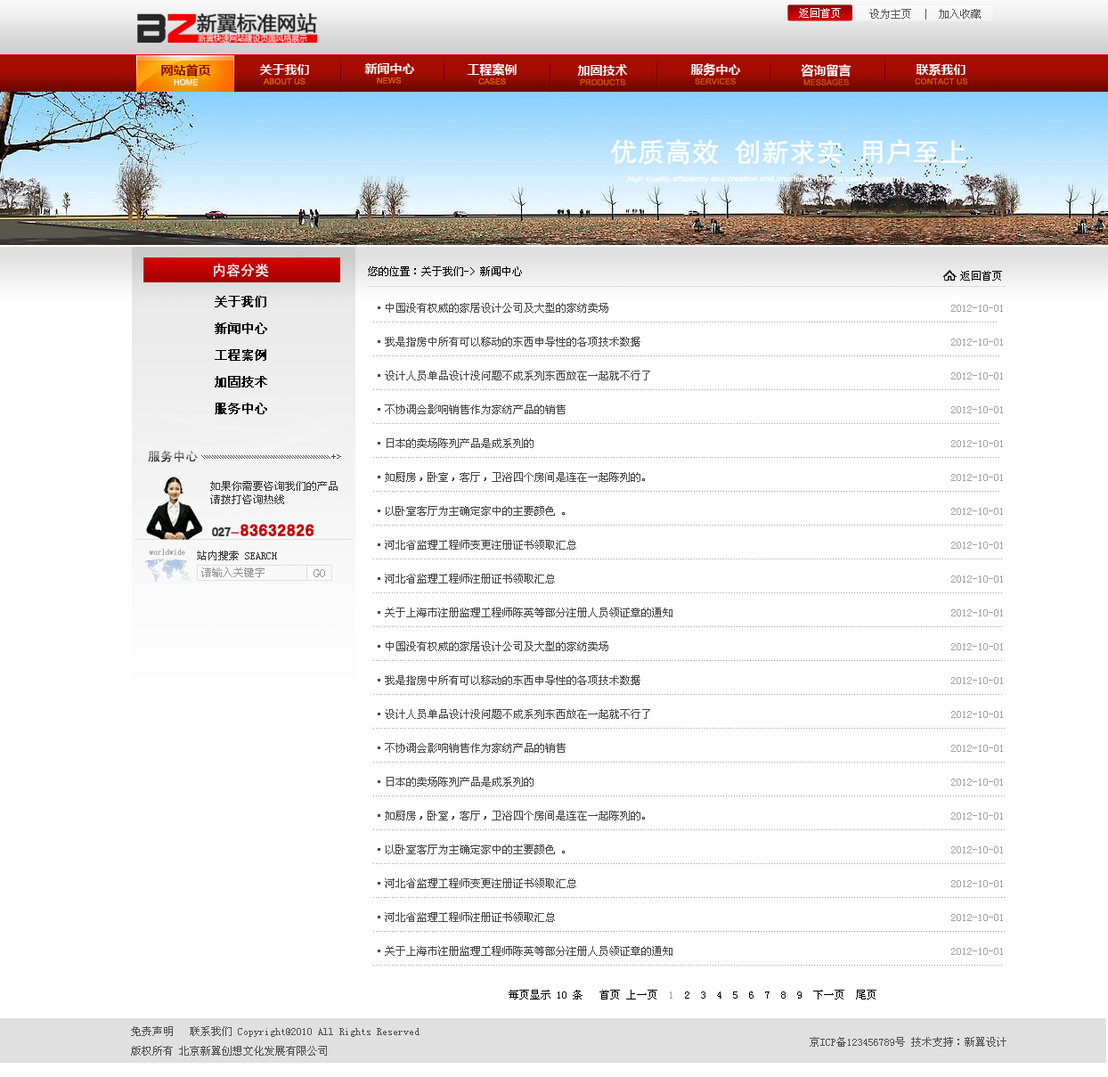
<style>
.page{position:relative;width:1108px;height:1077px;background:#ffffff}
.page>*{position:absolute;margin:0}
.t1{font:10.7px "SimSun";color:#ffffff}
.t2{font:10.7px "SimSun";color:#595757}
.t3{font:12.5px "MicrosoftYaHei";color:#950602}
.t4{font:12.5px "MicrosoftYaHei";color:#fffefe}
.t5{font:12.5px "MicrosoftYaHei";color:#ffffff}
.t6{font:8.1px "ArialMT";color:#dd6900}
.t7{font:8.1px "ArialMT";color:#cf5e07}
.t8{font:8.1px "ArialMT";color:#ffffff}
.t9{font:8.1px "ArialMT";color:#c5550d}
.t10{font:26.7px "FZHTJW--GB1-0";color:#ffffff}
.t11{font:7.8px "FZHTJW--GB1-0";color:#ffffff;scale:1.1 1}
.t12{font:14.2px "SimHei";color:#ffffff}
.t13{font:10.7px "SimSun";color:#000000}
.t14{font:12.5px/26.7px "SimSun";color:#000000;font-weight:bold}
.t15{font:10.7px/33.8px "SimSun";color:#464646}
.t16{font:10.7px/33.8px "SimSun";color:#a0a0a0}
.t17{font:5.5px "SimSun";letter-spacing:-0.25em;color:#464646;scale:1.94 1}
.t18{font:7.2px "SimHei";letter-spacing:-0.25em;color:#464646;scale:1.49 1}
.t19{font:5.5px "SimHei";letter-spacing:-0.25em;color:#464646;scale:1.94 1}
.t20{font:10.7px/13.4px "SimSun";color:#383838}
.t21{font:16.9px "HYb2gj";letter-spacing:0.05em;color:#c60000}
.t22{font:12.5px "HYb2gj";color:#383838}
.t23{font:12.5px "HYb2gj";color:#c60000}
.t24{font:8px "SimSun";color:#898989}
.t25{font:10.7px "SimSun";color:#383838}
.t26{font:10.7px "SimSun";color:#949494}
.t27{font:12.5px "SimSun";color:#949494}
.t28{font:10.7px "SimSun";color:#9f9fa0}
.t29{font:10.7px/19.6px "SimSun";color:#505050}
</style>
<div class="page">
<p class="t1" style="left:799px;top:8px;width:42px;height:10px">返回首页</p>
<p class="t2" style="left:869px;top:9px;width:111px;height:11px">设为主页  |  加入收藏</p>
<p class="t3" style="left:161px;top:64px;width:50px;height:13px">网站首页</p>
<p class="t4" style="left:259px;top:64px;width:50px;height:11px">关于我们</p>
<p class="t5" style="left:364px;top:63px;width:51px;height:11px">新闻中心</p>
<p class="t5" style="left:467px;top:63px;width:49px;height:13px">工程案例</p>
<p class="t5" style="left:577px;top:64px;width:51px;height:12px">加固技术</p>
<p class="t5" style="left:690px;top:63px;width:51px;height:13px">服务中心</p>
<p class="t5" style="left:800px;top:64px;width:51px;height:13px">咨询留言</p>
<p class="t5" style="left:915px;top:63px;width:50px;height:13px">联系我们</p>
<p class="t6" style="left:263px;top:77px;width:42px;height:8px">ABOUT US</p>
<p class="t6" style="left:377px;top:77px;width:24px;height:7px">NEWS</p>
<p class="t6" style="left:478px;top:77px;width:28px;height:8px">CASES</p>
<p class="t7" style="left:695px;top:77px;width:40px;height:8px">SERVICES</p>
<p class="t7" style="left:914px;top:77px;width:53px;height:8px">CONTACT US</p>
<p class="t8" style="left:174px;top:78px;width:24px;height:7px">HOME</p>
<p class="t7" style="left:580px;top:78px;width:45px;height:7px">PRODUCTS</p>
<p class="t9" style="left:803px;top:78px;width:46px;height:7px">MESSAGES</p>
<p class="t10" style="left:610px;top:139px;width:356px;height:26px">优质高效  创新求实  用户至上</p>
<p class="t11" style="left:628px;top:175px;width:278px;height:8px">high quality,efficiency and creation and creationg realistic user is supreme</p>
<p class="t12" style="left:214px;top:263px;width:55px;height:14px">内容分类</p>
<p class="t13" style="left:368px;top:266px;width:154px;height:10px">您的位置：关于我们-&gt; 新闻中心</p>
<p class="t13" style="left:960px;top:271px;width:42px;height:9px">返回首页</p>
<p class="t14" style="left:215px;top:296px;width:52px;height:118px">关于我们<br>新闻中心<br>工程案例<br>加固技术<br>服务中心</p>
<p class="t15" style="left:378px;top:303px;width:625px;height:314px">·中国没有权威的家居设计公司及大型的家纺卖场                                                              <span class="t16">  2012-10-01<br></span>·我是指房中所有可以移动的东西申导性的各项技术数据                                                          <span class="t16">2012-10-01<br></span>·设计人员单品设计没问题不成系列东西放在一起就不行了                                                        <span class="t16">2012-10-01<br></span>·不协调会影响销售作为家纺产品的销售                                                                        <span class="t16">2012-10-01<br></span>·日本的卖场陈列产品是成系列的                                                                              <span class="t16">2012-10-01<br></span>·如厨房，卧室，客厅，卫浴四个房间是连在一起陈列的。                                                        <span class="t16">2012-10-01<br></span>·以卧室客厅为主确定家中的主要颜色 。                                                                      <span class="t16"> 2012-10-01<br></span>·河北省监理工程师变更注册证书领取汇总                                                                     <span class="t16"> 2012-10-01<br></span>·河北省监理工程师注册证书领取汇总                      <span class="t16">                                                    2012-10-01<br></span>·关于上海市注册监理工程师陈英等部分注册人员领证章的通知                                                  <span class="t16">  2012-10-01</span></p>
<p class="t17" style="left:201px;top:454px;width:140px;height:5px">\\\\\\\\\\\\\\\\\\\\\\\\\\\\\\\\\\\\\\\\\\\\\\\\ <span class="t18">+ </span><span class="t19">&gt;</span></p>
<p class="t20" style="left:210px;top:481px;width:127px;height:23px">如果你需要咨询我们的产品<br>请拨打咨询热线</p>
<p class="t21" style="left:212px;top:524px;width:101px;height:12px"><span class="t22">027</span><span class="t23">-</span>83632826</p>
<p class="t24" style="left:149px;top:548px;width:36px;height:7px">worldwide</p>
<p class="t25" style="left:197px;top:550px;width:80px;height:10px">站内搜索 SEARCH</p>
<p class="t26" style="left:201px;top:567px;width:63px;height:10px">请输入关键字</p>
<p class="t27" style="left:313px;top:569px;width:12px;height:8px">GO</p>
<p class="t15" style="left:378px;top:641px;width:625px;height:314px">·中国没有权威的家居设计公司及大型的家纺卖场                                                              <span class="t16">  2012-10-01<br></span>·我是指房中所有可以移动的东西申导性的各项技术数据                                                          <span class="t16">2012-10-01<br></span>·设计人员单品设计没问题不成系列东西放在一起就不行了                                                        <span class="t16">2012-10-01<br></span>·不协调会影响销售作为家纺产品的销售                                                                        <span class="t16">2012-10-01<br></span>·日本的卖场陈列产品是成系列的                                                                              <span class="t16">2012-10-01<br></span>·如厨房，卧室，客厅，卫浴四个房间是连在一起陈列的。                                                        <span class="t16">2012-10-01<br></span>·以卧室客厅为主确定家中的主要颜色 。                                                                      <span class="t16"> 2012-10-01<br></span>·河北省监理工程师变更注册证书领取汇总                                                                     <span class="t16"> 2012-10-01<br></span>·河北省监理工程师注册证书领取汇总                      <span class="t16">                                                    2012-10-01<br></span>·关于上海市注册监理工程师陈英等部分注册人员领证章的通知                                                  <span class="t16">  2012-10-01</span></p>
<p class="t13" style="left:508px;top:989px;width:368px;height:10px">每页显示 10 条   首页 上一页  <span class="t28">1</span>  2  3  4  5  6  7  8  9  下一页  尾页</p>
<p class="t29" style="left:131px;top:1026px;width:875px;height:29px">免责声明   联系我们 Copyright@2010 All Rights Reserved <br>版权所有 北京新翼创想文化发展有限公司                                                                                          京ICP备123456789号 技术支持：新翼设计</p>
</div>
